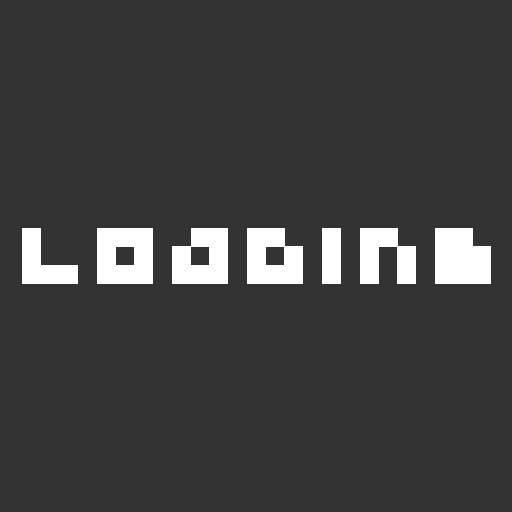
<style>
.page{position:relative;width:512px;height:512px;background:#333333}
.page>*{position:absolute;margin:0}
.t1{font:75px "Marvelous-3x3";color:#ffffff}
</style>
<div class="page">
<p class="t1" style="left:22px;top:228px;width:469px;height:56px">loading</p>
</div>
